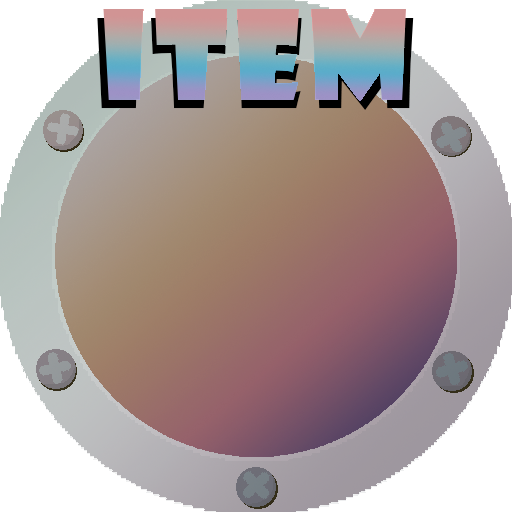
<style>
.page{position:relative;width:512px;height:512px}
.page>*{position:absolute;margin:0}
.t1{font:120px "ShowcardGothic-Reg";letter-spacing:0.06em;scale:1.04 1}
</style>
<div class="page">
<p class="t1" style="left:97px;top:18px;width:317px;height:92px">ITEM</p>
</div>
